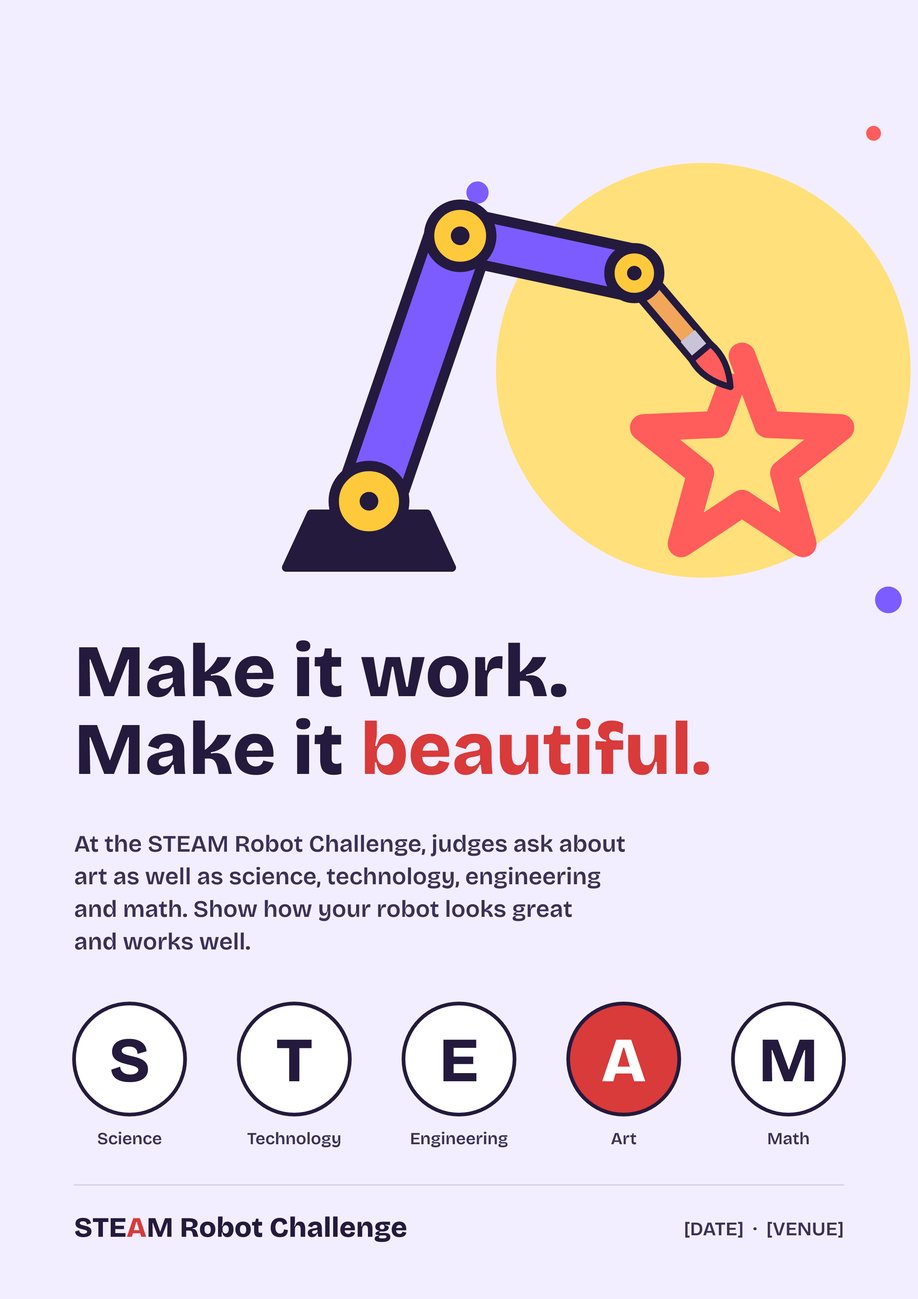
<style>
.page{position:relative;width:918px;height:1299px;background:#f3eeff}
.page>*{position:absolute;margin:0}
.t1{font:74px/77.7px "BricolageGrotesque-ExtraBold";color:#241a3d}
.t2{font:74px/77.7px "BricolageGrotesque-ExtraBold";color:#d93a3a}
.t3{font:23.7px/32.6px "BricolageGrotesque-SemiBold";color:#3b3157}
.t4{font:62.9px "BricolageGrotesque-ExtraBold";color:#241a3d}
.t5{font:62.9px "BricolageGrotesque-ExtraBold";color:#ffffff}
.t6{font:17px "BricolageGrotesque-SemiBold";color:#3b3157}
.t7{font:28.1px "BricolageGrotesque-ExtraBold";color:#241a3d}
.t8{font:28.1px "BricolageGrotesque-ExtraBold";color:#d93a3a}
.t9{font:19.3px "BricolageGrotesque-SemiBold";color:#3b3157}
</style>
<div class="page">
<p class="t1" style="left:79px;top:640px;width:630px;height:135px">Make it work.<br>Make it <span class="t2">beautiful.</span></p>
<p class="t3" style="left:74px;top:834px;width:551px;height:116px">At the STEAM Robot Challenge, judges ask about<br>art as well as science, technology, engineering<br>and math. Show how your robot looks great<br>and works well.</p>
<p class="t4" style="left:111px;top:1038px;width:37px;height:44px">S</p>
<p class="t4" style="left:277px;top:1039px;width:35px;height:42px">T</p>
<p class="t4" style="left:444px;top:1039px;width:32px;height:42px">E</p>
<p class="t5" style="left:602px;top:1039px;width:43px;height:42px">A</p>
<p class="t4" style="left:763px;top:1039px;width:51px;height:42px">M</p>
<p class="t6" style="left:98px;top:1131px;width:63px;height:13px">Science</p>
<p class="t6" style="left:247px;top:1132px;width:94px;height:15px">Technology</p>
<p class="t6" style="left:411px;top:1131px;width:97px;height:16px">Engineering</p>
<p class="t6" style="left:611px;top:1133px;width:25px;height:11px">Art</p>
<p class="t6" style="left:769px;top:1132px;width:40px;height:12px">Math</p>
<p class="t7" style="left:75px;top:1216px;width:332px;height:26px">STE<span class="t8">A</span>M Robot Challenge</p>
<p class="t9" style="left:685px;top:1221px;width:158px;height:17px">[DATE]  ·  [VENUE]</p>
</div>
